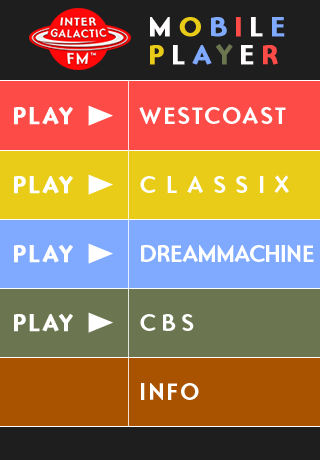
<style>
.page{position:relative;width:320px;height:460px;background:#1e1e1e}
.page>*{position:absolute;margin:0}
.t1{font:28px/28px "OttomatBold";letter-spacing:0.22em;color:#fffdfd;text-transform:uppercase;font-weight:bold}
.t2{font:28px/28px "OttomatBold";letter-spacing:0.22em;color:#e9cc18;text-transform:uppercase;font-weight:bold}
.t3{font:28px/28px "OttomatBold";letter-spacing:0.22em;color:#7faaff;text-transform:uppercase;font-weight:bold}
.t4{font:28px/28px "OttomatBold";letter-spacing:0.22em;color:#fd4b47;text-transform:uppercase;font-weight:bold}
.t5{font:28px/28px "OttomatBold";letter-spacing:0.22em;color:#6b7650;text-transform:uppercase;font-weight:bold}
.t6{font:24px "OttomatBold";letter-spacing:0.05em;color:#ffffff;text-transform:uppercase;font-weight:bold}
.t7{font:24px "OttomatBold";letter-spacing:0.05em;color:#ffffff;text-transform:uppercase}
.t8{font:24px "OttomatBold";letter-spacing:0.38em;color:#ffffff;text-transform:uppercase}
.t9{font:24px "OttomatBold";letter-spacing:-0.06em;color:#ffffff;text-transform:uppercase}
.t10{font:24px "OttomatBold";letter-spacing:0.2em;color:#ffffff;text-transform:uppercase}
</style>
<div class="page">
<p class="t1" style="left:150px;top:17px;width:135px;height:48px">m<span class="t2">o</span><span class="t3">b</span><span class="t4">i</span>l<span class="t3">e<br></span><span class="t2">p</span>l<span class="t3">a</span><span class="t5">y</span>e<span class="t4">r</span></p>
<p class="t6" style="left:14px;top:107px;width:59px;height:18px">play</p>
<p class="t7" style="left:139px;top:107px;width:147px;height:17px">westcoast</p>
<p class="t6" style="left:14px;top:176px;width:59px;height:18px">play</p>
<p class="t8" style="left:140px;top:175px;width:149px;height:18px">classix</p>
<p class="t6" style="left:14px;top:245px;width:59px;height:18px">play</p>
<p class="t9" style="left:141px;top:244px;width:173px;height:18px">dreammachine</p>
<p class="t6" style="left:14px;top:314px;width:59px;height:18px">play</p>
<p class="t10" style="left:140px;top:314px;width:54px;height:17px">cbs</p>
<p class="t7" style="left:141px;top:383px;width:58px;height:17px">info</p>
</div>
